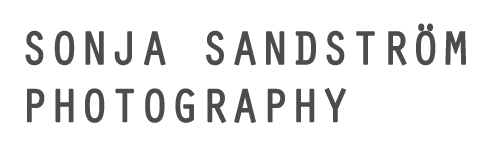
<style>
.page{position:relative;width:500px;height:150px;background:#ffffff}
.page>*{position:absolute;margin:0}
.t1{font:48px "OratorStd";color:#4c4c4c;font-weight:bold}
</style>
<div class="page">
<p class="t1" style="left:25px;top:23px;width:441px;height:101px">SONJA SANDSTRÖM<br>PHOTOGRAPHY</p>
</div>
